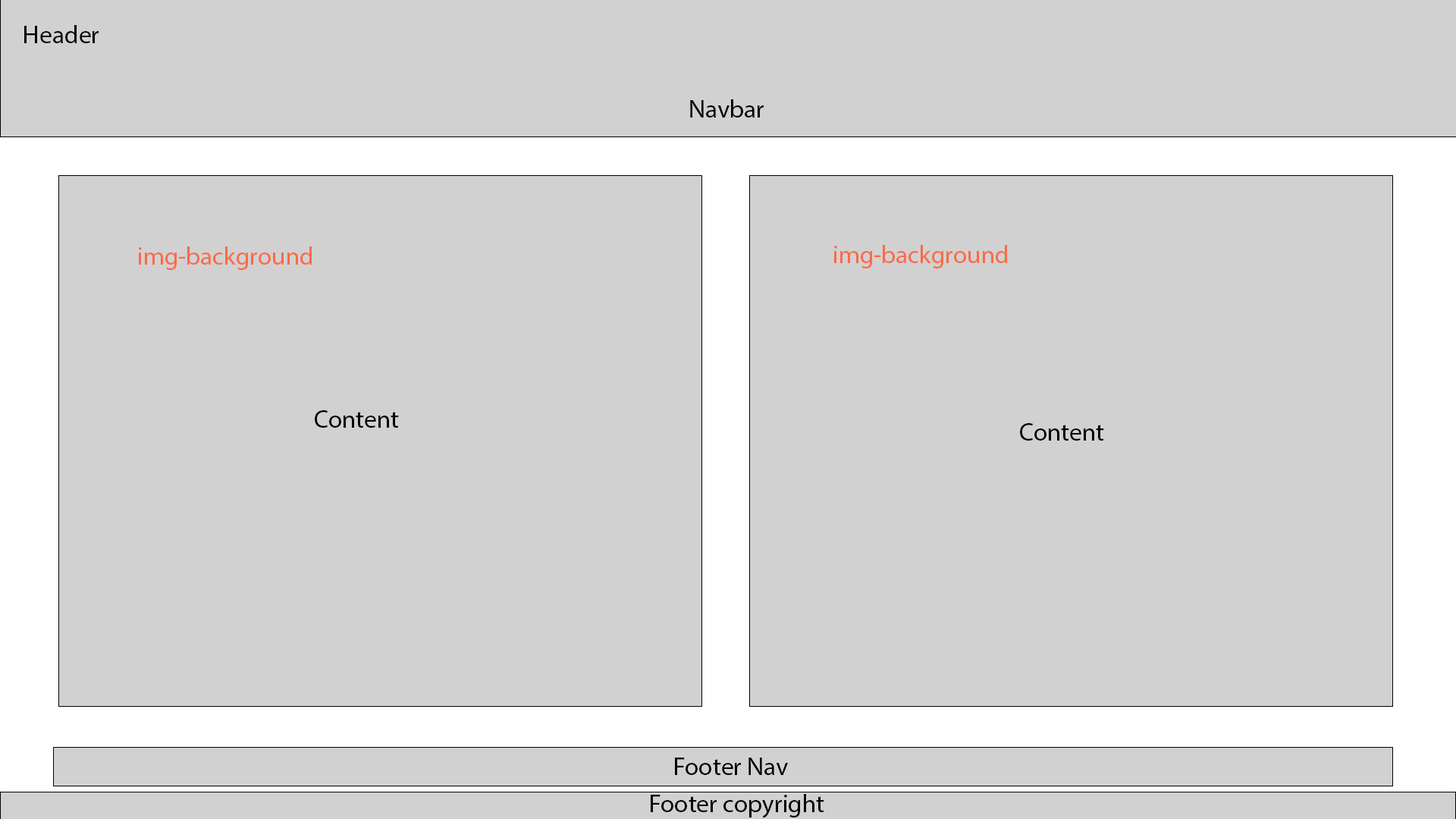
<style>
.page{position:relative;width:1456px;height:819px;background:#d2d1d1}
.page>*{position:absolute;margin:0}
.t1{font:25.3px "MyriadPro-Regular";color:#000000}
.t2{font:25.3px "MyriadPro-Regular";color:#f96b47}
</style>
<div class="page">
<p class="t1" style="left:24px;top:25px;width:75px;height:18px">Header</p>
<p class="t1" style="left:690px;top:99px;width:74px;height:19px">Navbar</p>
<p class="t2" style="left:834px;top:245px;width:173px;height:23px">img-background</p>
<p class="t2" style="left:139px;top:246px;width:173px;height:24px">img-background</p>
<p class="t1" style="left:315px;top:410px;width:84px;height:18px">Content</p>
<p class="t1" style="left:1020px;top:423px;width:84px;height:18px">Content</p>
<p class="t1" style="left:675px;top:758px;width:113px;height:17px">Footer Nav</p>
<p class="t1" style="left:651px;top:794px;width:173px;height:24px">Footer copyright</p>
</div>
